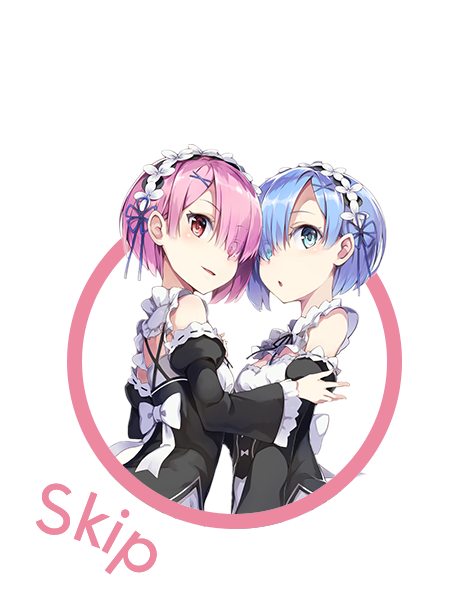
<style>
.page{position:relative;width:454px;height:600px;background:#ffffff}
.page>*{position:absolute;margin:0}
.t1{font:66.7px "HKExplorerSharp-Regular";letter-spacing:-0.035em;color:#ed88a1}
</style>
<div class="page">
<p class="t1" style="left:36px;top:483px;width:121px;height:92px">Skip</p>
<p class="t1" style="left:36px;top:483px;width:121px;height:92px">Skip</p>
</div>
